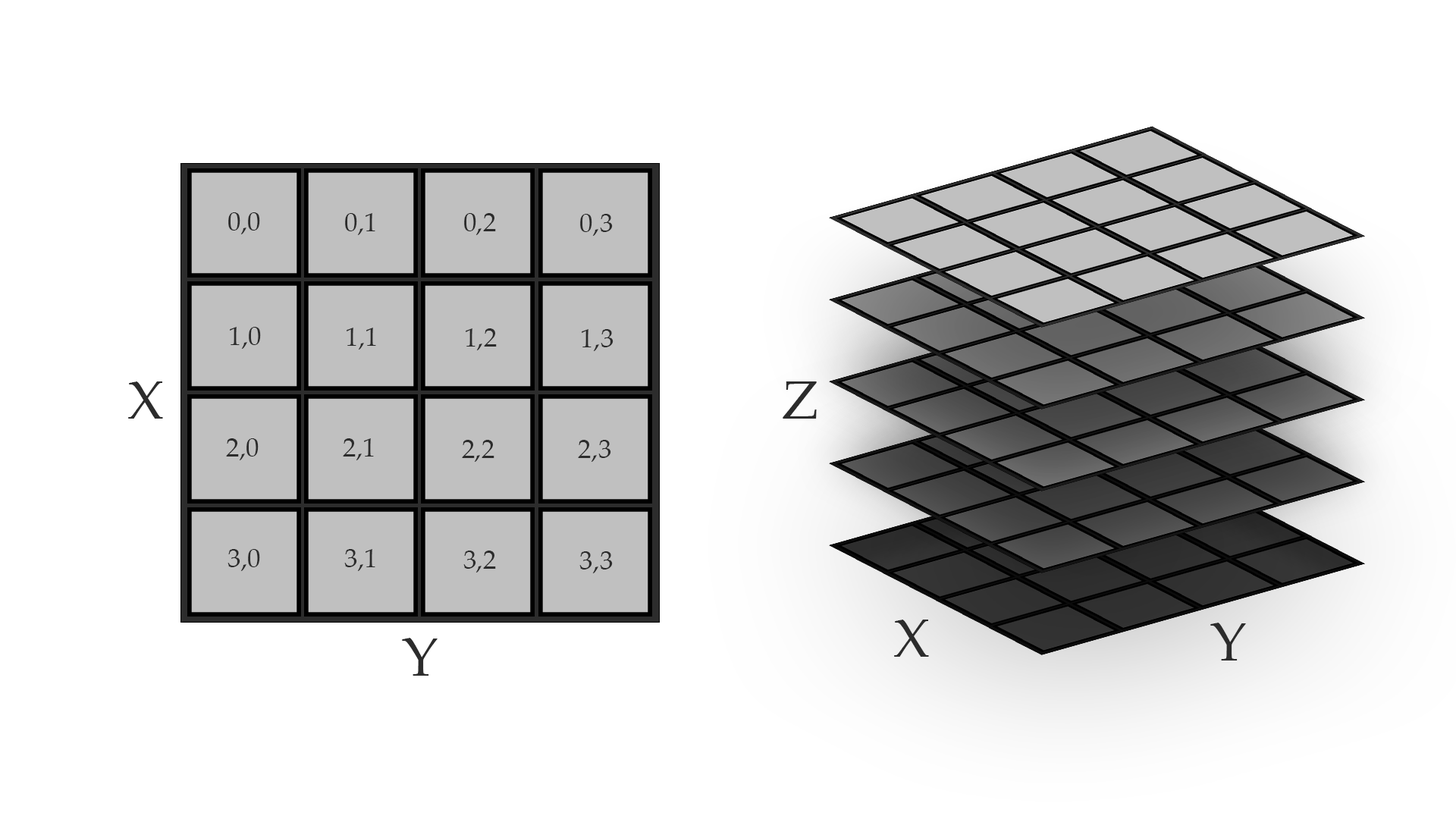
<style>
.page{position:relative;width:1456px;height:819px;background:#ffffff}
.page>*{position:absolute;margin:0}
.t1{font:26.5px "PalatinoLinotype-Roman";color:#2c2c2c}
.t2{font:54.6px "PalatinoLinotype-Roman";color:#2c2c2c}
</style>
<div class="page">
<p class="t1" style="left:228px;top:212px;width:32px;height:22px">0,0</p>
<p class="t1" style="left:345px;top:213px;width:30px;height:22px">0,1</p>
<p class="t1" style="left:464px;top:213px;width:32px;height:22px">0,2</p>
<p class="t1" style="left:580px;top:214px;width:33px;height:22px">0,3</p>
<p class="t1" style="left:230px;top:327px;width:31px;height:22px">1,0</p>
<p class="t1" style="left:347px;top:328px;width:29px;height:22px">1,1</p>
<p class="t1" style="left:466px;top:328px;width:31px;height:22px">1,2</p>
<p class="t1" style="left:582px;top:329px;width:31px;height:22px">1,3</p>
<p class="t2" style="left:128px;top:381px;width:35px;height:38px">X</p>
<p class="t2" style="left:783px;top:381px;width:34px;height:38px">Z</p>
<p class="t1" style="left:226px;top:438px;width:33px;height:22px">2,0</p>
<p class="t1" style="left:343px;top:438px;width:31px;height:22px">2,1</p>
<p class="t1" style="left:462px;top:440px;width:32px;height:22px">2,2</p>
<p class="t1" style="left:578px;top:440px;width:33px;height:22px">2,3</p>
<p class="t1" style="left:227px;top:549px;width:33px;height:22px">3,0</p>
<p class="t1" style="left:344px;top:549px;width:31px;height:22px">3,1</p>
<p class="t1" style="left:463px;top:551px;width:33px;height:22px">3,2</p>
<p class="t1" style="left:579px;top:551px;width:34px;height:22px">3,3</p>
<p class="t2" style="left:894px;top:620px;width:35px;height:37px">X</p>
<p class="t2" style="left:1210px;top:623px;width:36px;height:37px">Y</p>
<p class="t2" style="left:402px;top:638px;width:36px;height:38px">Y</p>
</div>
